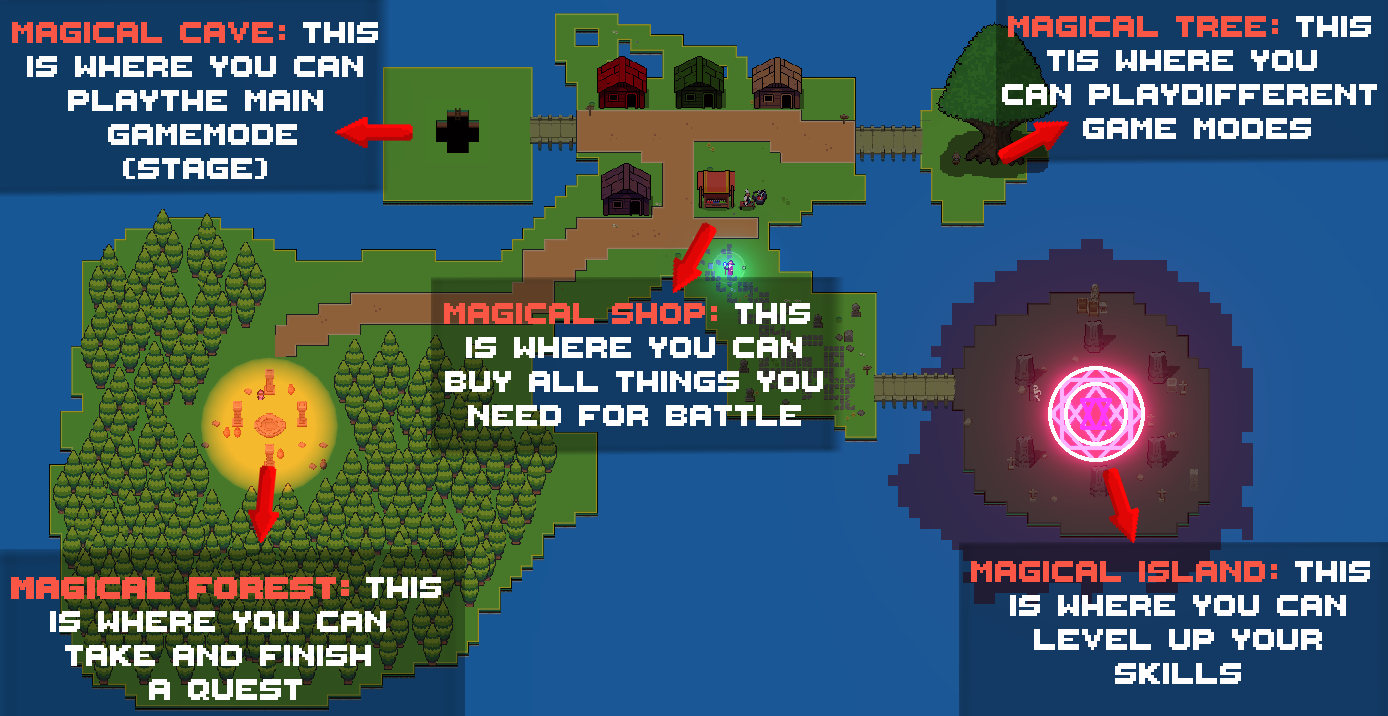
<style>
.page{position:relative;width:1388px;height:716px}
.page>*{position:absolute;margin:0}
.t1{font:48px/34px "ThaleahFat";color:#ffffff}
.t2{font:48px/34px "ThaleahFat";color:#f95646}
.t3{font:48px/34px "ThaleahFat";color:#fcfcfc}
.t4{font:48px/34px "ThaleahFat";color:#fffdfd}
.t5{font:48px/34px "ThaleahFat";color:#f95646;font-weight:bold}
</style>
<div class="page">
<p class="t1" style="left:1002px;top:16px;width:375px;height:123px;text-align:center"><span class="t2">magical tree: </span>this<br>tis where you <br>can playdifferent<br> game modes</p>
<p class="t3" style="left:12px;top:22px;width:366px;height:157px;text-align:center"><span class="t2">Magical cave: </span><span class="t1">THIS<br></span> is where you can <br>playthe main<br> gamemode<br>(stage)</p>
<p class="t1" style="left:444px;top:303px;width:379px;height:123px;text-align:center"><span class="t2">magical shop: </span>this <br>is where you can<br>buy all things you<br>need for battle</p>
<p class="t4" style="left:971px;top:561px;width:399px;height:123px;text-align:center"><span class="t2">Magical island: </span>this <br>is where you can<br>level up your<br>skills</p>
<p class="t1" style="left:11px;top:577px;width:430px;height:123px;text-align:center"><span class="t5">magical forest: </span>this<br>is where you can <br>take and finish <br>a quest</p>
</div>
